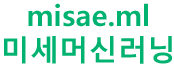
<style>
.page{position:relative;width:174px;height:69px;background:#ffffff}
.page>*{position:absolute;margin:0}
.t1{font:29.3px "MalgunGothicBold";color:#00b26f}
</style>
<div class="page">
<p class="t1" style="left:4px;top:3px;width:168px;height:61px;text-align:center">misae.ml<br>미세머신러닝</p>
</div>
